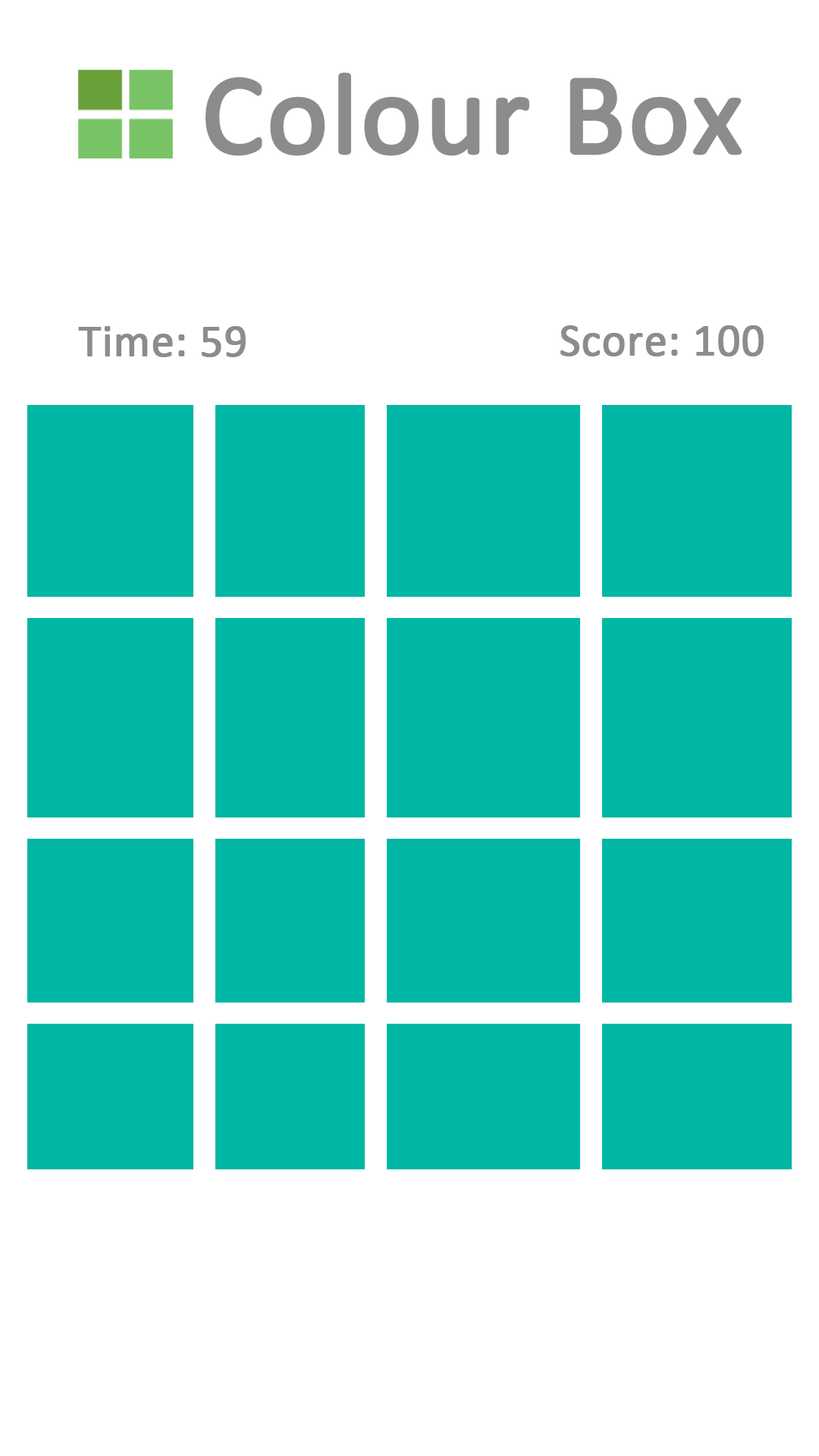
<style>
.page{position:relative;width:819px;height:1456px;background:#ffffff}
.page>*{position:absolute;margin:0}
.t1{font:116px "Calibri";color:#8c8c8c;font-weight:bold}
.t2{font:45.5px "Calibri";color:#8c8c8c;font-weight:bold}
</style>
<div class="page">
<p class="t1" style="left:206px;top:72px;width:536px;height:84px">Colour Box</p>
<p class="t2" style="left:78px;top:326px;width:168px;height:31px">Time: 59</p>
<p class="t2" style="left:560px;top:325px;width:204px;height:31px">Score: 100</p>
</div>
